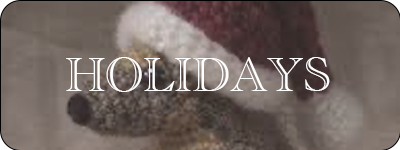
<style>
.page{position:relative;width:400px;height:150px}
.page>*{position:absolute;margin:0}
.t1{font:50px "AcademyEngravedLetPlain";color:#ffffff}
</style>
<div class="page">
<p class="t1" style="left:66px;top:57px;width:264px;height:35px">HOLIDAYS</p>
</div>
